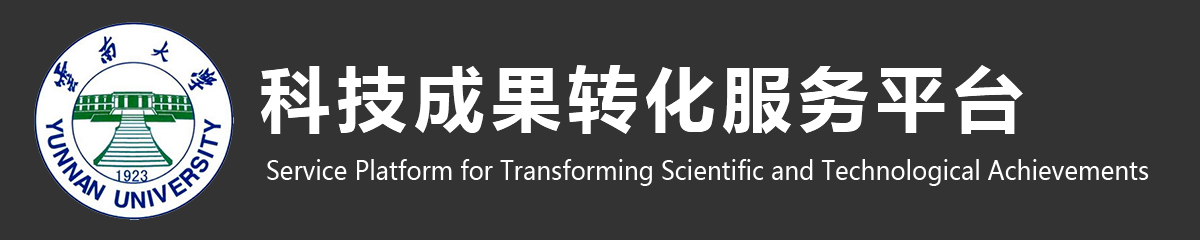
<style>
.page{position:relative;width:1200px;height:240px;background:#333333}
.page>*{position:absolute;margin:0}
.t1{font:70px "MicrosoftYaHei-Bold";letter-spacing:0.1em;color:#ffffff}
.t2{font:26.4px "MicrosoftYaHei";color:#ffffff;scale:0.91 1}
</style>
<div class="page">
<p class="t1" style="left:261px;top:65px;width:762px;height:69px">科技成果转化服务平台</p>
<p class="t2" style="left:267px;top:159px;width:882px;height:27px">Service Platform for Transforming Scientific and Technological Achievements</p>
</div>
